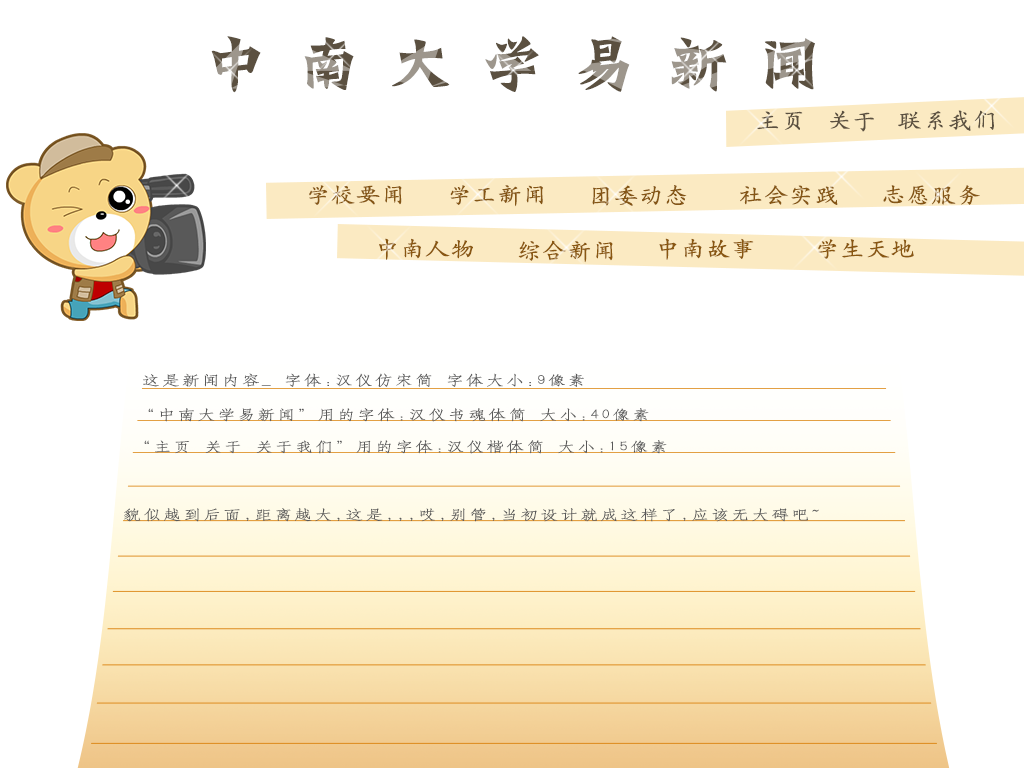
<style>
.page{position:relative;width:1024px;height:768px;background:#ffffff}
.page>*{position:absolute;margin:0}
.t1{font:60px "HYh3gj";letter-spacing:0.444em;scale:1.07 1}
.t2{font:22.5px "HYc1gj";letter-spacing:0.05em;color:#5b5040;scale:1.07 1}
.t3{font:22.5px "HYc1gj";letter-spacing:0.05em;color:#855615;scale:1.07 1}
.t4{font:22.5px "HYc1gj";letter-spacing:0.05em;color:#895711;scale:1.07 1}
.t5{font:13.5px "HYd1gj";letter-spacing:0.111em;color:#595959;scale:1.33 1}
</style>
<div class="page">
<p class="t1" style="left:211px;top:36px;width:604px;height:57px">中南大学易新闻</p>
<p class="t2" style="left:757px;top:111px;width:46px;height:19px">主页</p>
<p class="t2" style="left:830px;top:110px;width:44px;height:22px">关于</p>
<p class="t2" style="left:898px;top:110px;width:96px;height:21px">联系我们</p>
<p class="t3" style="left:309px;top:185px;width:93px;height:20px">学校要闻</p>
<p class="t3" style="left:450px;top:185px;width:93px;height:22px">学工新闻</p>
<p class="t3" style="left:592px;top:185px;width:95px;height:21px">团委动态</p>
<p class="t3" style="left:740px;top:185px;width:98px;height:20px">社会实践</p>
<p class="t3" style="left:883px;top:185px;width:97px;height:20px">志愿服务</p>
<p class="t4" style="left:379px;top:238px;width:94px;height:22px">中南人物</p>
<p class="t4" style="left:518px;top:240px;width:95px;height:23px">综合新闻</p>
<p class="t4" style="left:659px;top:238px;width:95px;height:22px">中南故事</p>
<p class="t4" style="left:818px;top:239px;width:96px;height:20px">学生天地</p>
<p class="t5" style="left:143px;top:373px;width:441px;height:14px">这是新闻内容_ 字体:汉仪仿宋简 字体大小:9像素</p>
<p class="t5" style="left:148px;top:408px;width:501px;height:14px">“中南大学易新闻”用的字体:汉仪书魂体简 大小:40像素</p>
<p class="t5" style="left:144px;top:440px;width:523px;height:14px">“主页 关于 关于我们”用的字体:汉仪楷体简 大小:15像素</p>
<p class="t5" style="left:124px;top:508px;width:695px;height:14px">貌似越到后面,距离越大,这是,,,哎,别管,当初设计就成这样了,应该无大碍吧~</p>
</div>
